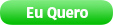
<style>
.page{position:relative;width:113px;height:25px}
.page>*{position:absolute;margin:0}
.t1{font:14.9px "KohinoorDevanagari-Bold";letter-spacing:-0.025em;color:#fefefe}
</style>
<div class="page">
<p class="t1" style="left:27px;top:7px;width:61px;height:14px">Eu Quero</p>
</div>
